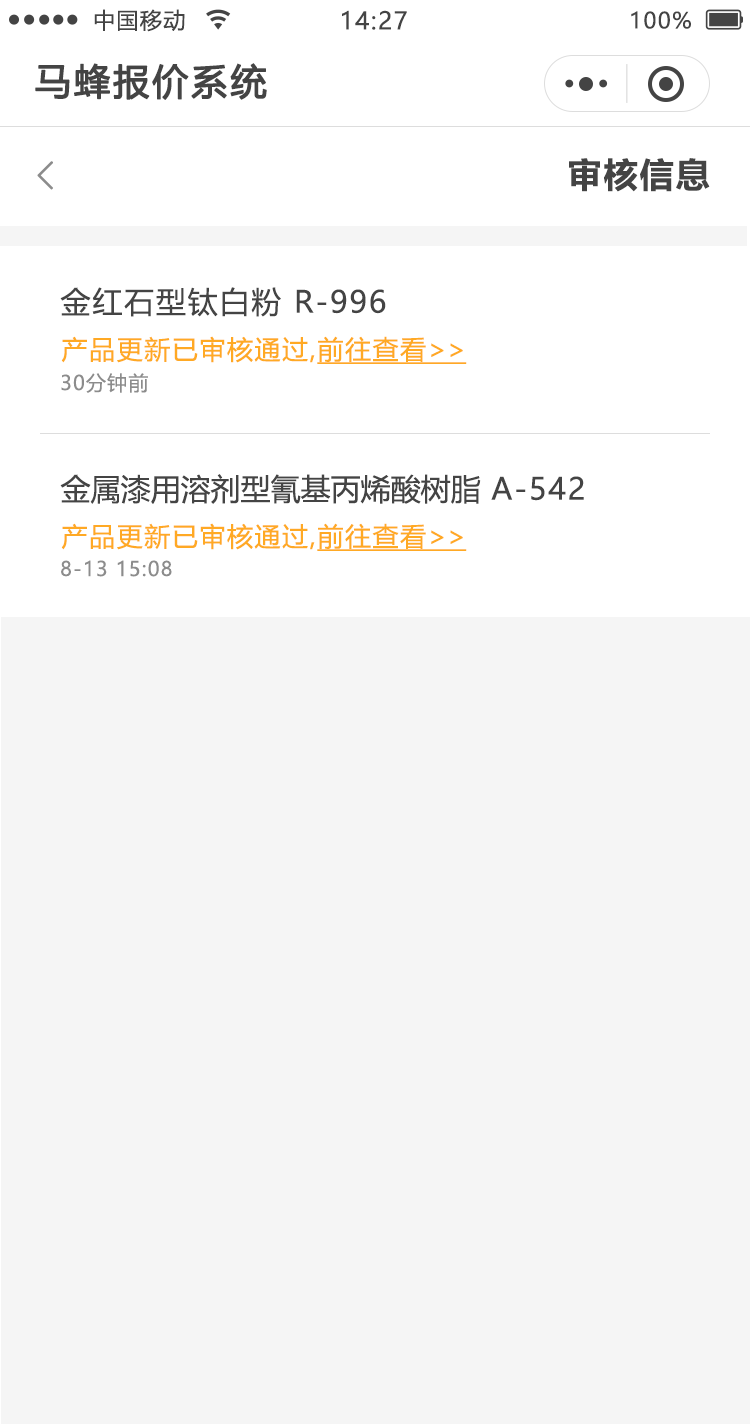
<style>
.page{position:relative;width:750px;height:1424px;background:#f5f5f5}
.page>*{position:absolute;margin:0}
.t1{font:22px "MicrosoftYaHeiUI";letter-spacing:0.06em;color:#444444}
.t2{font:24px "MicrosoftYaHeiUI";letter-spacing:0.06em;color:#444444}
.t3{font:36px "MicrosoftYaHeiUI";letter-spacing:0.06em;color:#444444;font-weight:bold}
.t4{font:39.2px "FangSong";letter-spacing:0.1em;color:#8c8c8c;font-weight:bold}
.t5{font:34px "MicrosoftYaHeiUI-Bold";letter-spacing:0.06em;color:#444444}
.t6{font:30px "MicrosoftYaHeiUI";letter-spacing:0.06em;color:#444444}
.t7{font:26px "MicrosoftYaHeiUI";letter-spacing:0.06em;color:#ffa924}
.t8{font:26px "MicrosoftYaHeiUI";letter-spacing:0.06em;color:#ffa924;text-decoration:underline}
.t9{font:26px "MicrosoftYaHeiUI";color:#ffa924;text-decoration:underline}
.t10{font:20px "MicrosoftYaHeiUI";letter-spacing:0.06em;color:#8c8c8c}
.t11{font:30px "MicrosoftYaHeiUI";color:#444444}
</style>
<div class="page">
<p class="t1" style="left:94px;top:9px;width:91px;height:23px">中国移动</p>
<p class="t2" style="left:342px;top:10px;width:65px;height:20px">14:27</p>
<p class="t1" style="left:631px;top:11px;width:60px;height:18px">100%</p>
<p class="t3" style="left:35px;top:63px;width:232px;height:37px">马蜂报价系统</p>
<p class="t4" style="left:37px;top:161px;width:16px;height:29px">&lt;</p>
<p class="t5" style="left:569px;top:158px;width:141px;height:34px">审核信息</p>
<p class="t6" style="left:60px;top:287px;width:326px;height:30px">金红石型钛白粉 R-996</p>
<p class="t7" style="left:61px;top:336px;width:406px;height:28px">产品更新已审核通过,<span class="t8">前往查看</span><span class="t9">&gt;&gt;</span></p>
<p class="t10" style="left:61px;top:373px;width:87px;height:20px">30分钟前</p>
<p class="t11" style="left:60px;top:474px;width:524px;height:30px">金属漆用溶剂型氰基丙烯酸树脂<span class="t6"> A-542</span></p>
<p class="t7" style="left:61px;top:523px;width:406px;height:28px">产品更新已审核通过,<span class="t8">前往查看</span><span class="t9">&gt;&gt;</span></p>
<p class="t10" style="left:61px;top:560px;width:111px;height:17px">8-13 15:08</p>
</div>
